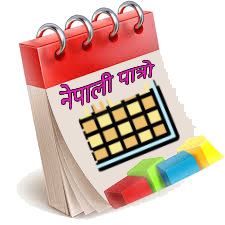
<style>
.page{position:relative;width:225px;height:225px;background:#ffffff}
.page>*{position:absolute;margin:0}
.t1{font:24px "Mukta-Regular";color:#ef1cc4}
</style>
<div class="page">
<p class="t1" style="left:59px;top:60px;width:96px;height:49px;rotate:-3deg">नेपाली पात्रो</p>
</div>
